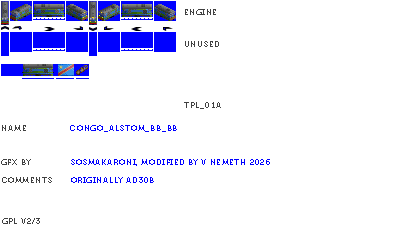
<style>
.page{position:relative;width:400px;height:230px;background:#ffffff}
.page>*{position:absolute;margin:0}
.t1{font:8px "Museo700-Regular";letter-spacing:0.075em;color:#404040;text-transform:uppercase}
.t2{font:8px "Museo700-Regular";letter-spacing:0.075em;color:#0000ff;text-transform:uppercase}
</style>
<div class="page">
<p class="t1" style="left:185px;top:9px;width:31px;height:6px">engine</p>
<p class="t1" style="left:185px;top:41px;width:34px;height:6px">unused</p>
<p class="t1" style="left:184px;top:102px;width:37px;height:7px">tpl_01a</p>
<p class="t1" style="left:2px;top:125px;width:24px;height:6px">name</p>
<p class="t2" style="left:70px;top:125px;width:107px;height:7px">Congo_Alstom_BB_BB</p>
<p class="t1" style="left:1px;top:159px;width:30px;height:6px">gfx by</p>
<p class="t2" style="left:71px;top:159px;width:199px;height:7px">sosmakaroni, modified by v nemeth 2026</p>
<p class="t1" style="left:2px;top:177px;width:50px;height:6px">comments</p>
<p class="t2" style="left:71px;top:177px;width:83px;height:6px">originally ad30b</p>
<p class="t1" style="left:2px;top:218px;width:38px;height:6px">gpl v2/3</p>
</div>
